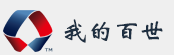
<style>
.page{position:relative;width:174px;height:55px;background:#efefef}
.page>*{position:absolute;margin:0}
.t1{font:26px "STXinwei";color:#1e2f41}
</style>
<div class="page">
<p class="t1" style="left:64px;top:19px;width:99px;height:24px">我的百世</p>
</div>
